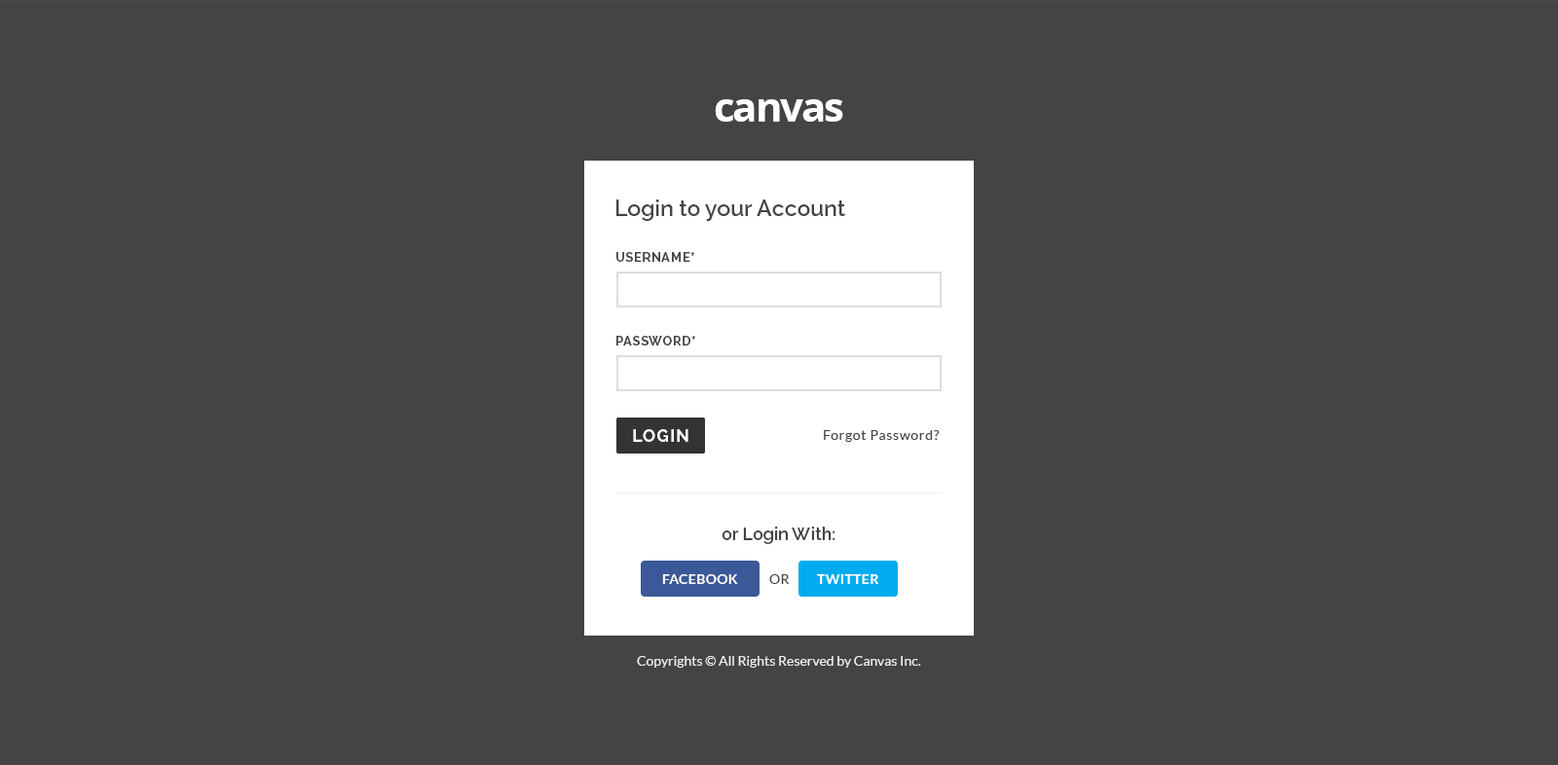
<style>
.page{position:relative;width:1558px;height:765px;background:#444444}
.page>*{position:absolute;margin:0}
.t1{font:40.9px "OpenSans-Bold";letter-spacing:-0.05em;color:#ffffff}
.t2{font:22.4px "Raleway-SemiBold";color:#444444}
.t3{font:12.7px "Raleway-Bold";letter-spacing:0.05em;color:#444444;text-transform:uppercase}
.t4{font:17.5px "Raleway-Bold";letter-spacing:0.05em;color:#ffffff;text-transform:uppercase}
.t5{font:13.6px "Lato-Regular";letter-spacing:0.05em;color:#444444}
.t6{font:17.5px "Raleway-SemiBold";color:#444444}
.t7{font:13.6px "Lato-Bold";letter-spacing:0.025em;color:#ffffff;text-transform:uppercase}
.t8{font:13.6px "Lato-Regular";letter-spacing:0.025em;color:#444444;text-transform:uppercase}
.t9{font:13.6px "Lato-Regular";color:#eeeeee}
</style>
<div class="page">
<p class="t1" style="left:715px;top:99px;width:128px;height:23px">canvas</p>
<p class="t2" style="left:616px;top:200px;width:229px;height:22px">Login to your Account</p>
<p class="t3" style="left:616px;top:252px;width:78px;height:10px">Username*</p>
<p class="t3" style="left:616px;top:336px;width:79px;height:10px">Password*</p>
<p class="t4" style="left:633px;top:429px;width:55px;height:13px">Login</p>
<p class="t5" style="left:824px;top:430px;width:116px;height:12px">Forgot Password?</p>
<p class="t6" style="left:722px;top:527px;width:113px;height:17px">or Login With:</p>
<p class="t7" style="left:662px;top:575px;width:76px;height:9px">Facebook</p>
<p class="t8" style="left:769px;top:575px;width:21px;height:9px">or</p>
<p class="t7" style="left:817px;top:575px;width:61px;height:9px">Twitter</p>
<p class="t9" style="left:637px;top:656px;width:284px;height:12px">Copyrights © All Rights Reserved by Canvas Inc.</p>
</div>
